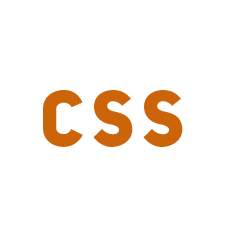
<style>
.page{position:relative;width:225px;height:225px;background:#ffffff}
.page>*{position:absolute;margin:0}
.t1{font:77.1px "UniSansHeavyCAPS";letter-spacing:0.11em;color:#cc650a;scale:0.97 1}
</style>
<div class="page">
<p class="t1" style="left:43px;top:90px;width:140px;height:57px">CSS</p>
</div>
